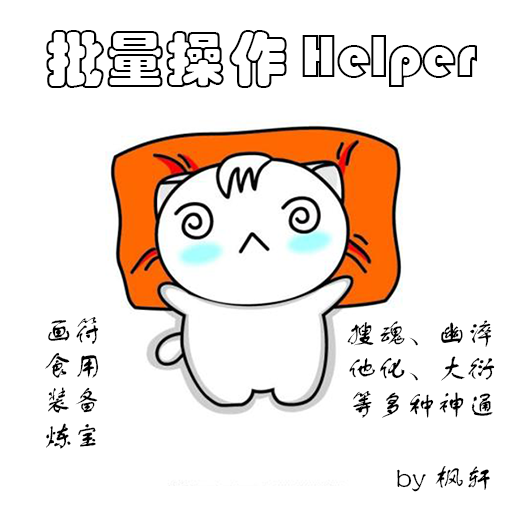
<style>
.page{position:relative;width:512px;height:512px;background:#ffffff}
.page>*{position:absolute;margin:0}
.t1{font:60px "STCaiyun";color:#000000}
.t2{font:30px/35.2px "FZSTK--GBK1-0";color:#000000}
.t3{font:30px "FZSTK--GBK1-0";color:#000000}
</style>
<div class="page">
<p class="t1" style="left:46px;top:30px;width:431px;height:58px">批量操作Helper</p>
<p class="t2" style="left:45px;top:317px;width:54px;height:132px">画符<br>食用<br>装备<br>炼宝</p>
<p class="t2" style="left:347px;top:320px;width:148px;height:98px">搜魂、幽淬<br>他化、大衍<br>等多种神通</p>
<p class="t3" style="left:397px;top:466px;width:93px;height:26px">by枫轩</p>
</div>
